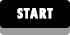
<style>
.page{position:relative;width:70px;height:35px;background:#000000}
.page>*{position:absolute;margin:0}
.t1{font:15.4px "TwCenMT-CondensedExtraBold";color:#ffffff;font-weight:bold}
</style>
<div class="page">
<p class="t1" style="left:17px;top:8px;width:36px;height:11px">START</p>
</div>
